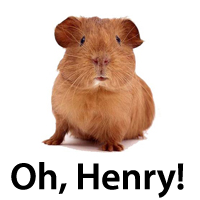
<style>
.page{position:relative;width:200px;height:200px;background:#ffffff}
.page>*{position:absolute;margin:0}
.t1{font:38px "MyriadPro-Semibold";color:#000000}
</style>
<div class="page">
<p class="t1" style="left:11px;top:162px;width:173px;height:36px">Oh, Henry!</p>
</div>
